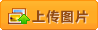
<style>
.page{position:relative;width:98px;height:30px}
.page>*{position:absolute;margin:0}
.t1{font:13px "MicrosoftYaHei";letter-spacing:0.1em;color:#924b12}
.t2{font:13px "MicrosoftYaHei";letter-spacing:0.1em}
</style>
<div class="page">
<p class="t1" style="left:32px;top:10px;width:56px;height:13px">上传图片</p>
<p class="t2" style="left:33px;top:11px;width:56px;height:13px">上传图片</p>
</div>
